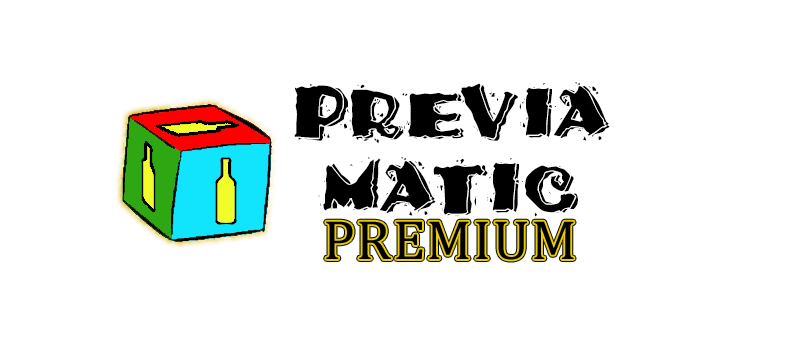
<style>
.page{position:relative;width:793px;height:348px;background:#ffffff}
.page>*{position:absolute;margin:0}
.t1{font:63px "TacoModern";letter-spacing:0.025em;color:#000000}
</style>
<div class="page">
<p class="t1" style="left:294px;top:82px;width:316px;height:135px;text-align:center">PREVIA<br>MATIC</p>
</div>
